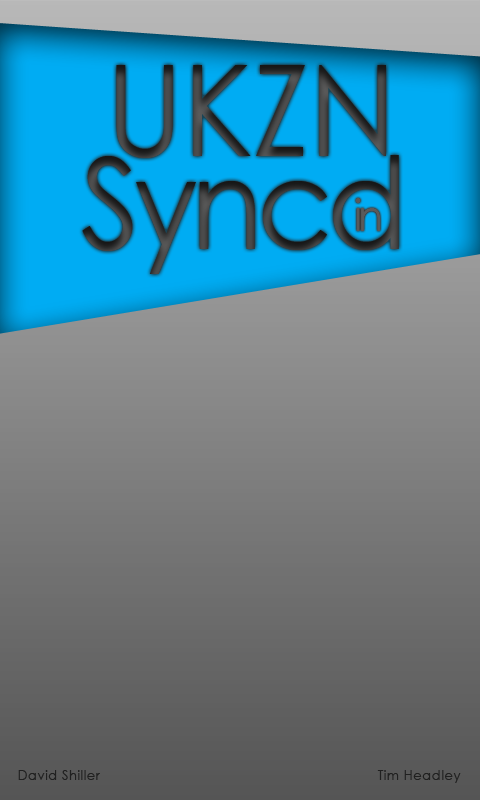
<style>
.page{position:relative;width:480px;height:800px}
.page>*{position:absolute;margin:0}
.t1{font:127.2px "CenturyGothic";color:#3f3f3f;scale:0.93 1}
.t2{font:127.2px "CenturyGothic";letter-spacing:-0.05em;scale:0.93 1}
.t3{font:43.9px "CenturyGothic";letter-spacing:-0.09em;color:#5a5a5a;scale:0.92 1}
.t4{font:14.4px "CenturyGothic";letter-spacing:0.03em;color:#202020;scale:0.93 1}
</style>
<div class="page">
<p class="t1" style="left:116px;top:65px;width:270px;height:93px">UKZN</p>
<p class="t2" style="left:82px;top:155px;width:317px;height:119px">Syncd</p>
<p class="t3" style="left:355px;top:198px;width:26px;height:33px">in</p>
<p class="t4" style="left:18px;top:770px;width:443px;height:13px">David Shiller            Tim Headley</p>
</div>
